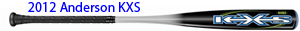
<style>
.page{position:relative;width:300px;height:31px;background:#ffffff}
.page>*{position:absolute;margin:0}
.t1{font:14px "MyriadPro-Regular";color:#0000ff}
</style>
<div class="page">
<p class="t1" style="left:28px;top:2px;width:112px;height:10px">2012 Anderson KXS</p>
</div>
